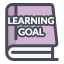
<style>
.page{position:relative;width:64px;height:64px;background:#ffffff}
.page>*{position:absolute;margin:0}
.t1{font:9.3px "Lato-Bold";color:#ffffff}
</style>
<div class="page">
<p class="t1" style="left:8px;top:17px;width:46px;height:19px;text-align:center">LEARNING<br>GOAL</p>
</div>
